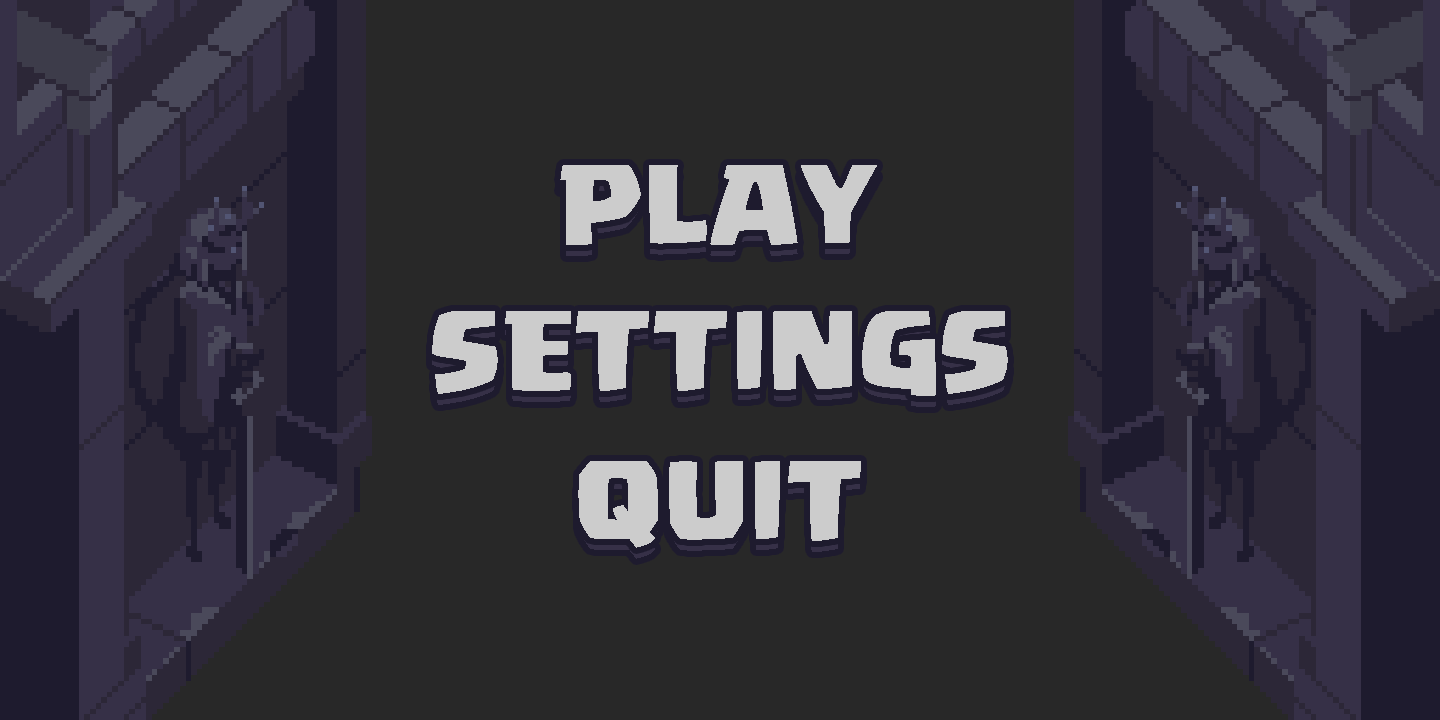
<style>
.page{position:relative;width:1440px;height:720px;background:#282828}
.page>*{position:absolute;margin:0}
.t1{font:86.8px "Supercell-Magic";color:#cccccc}
</style>
<div class="page">
<p class="t1" style="left:560px;top:165px;width:317px;height:80px">PLAY</p>
<p class="t1" style="left:560px;top:176px;width:317px;height:80px">PLAY</p>
<p class="t1" style="left:432px;top:311px;width:576px;height:85px">SETTINGS</p>
<p class="t1" style="left:432px;top:322px;width:576px;height:85px">SETTINGS</p>
<p class="t1" style="left:578px;top:461px;width:283px;height:87px">QUIT</p>
<p class="t1" style="left:578px;top:472px;width:283px;height:87px">QUIT</p>
</div>
